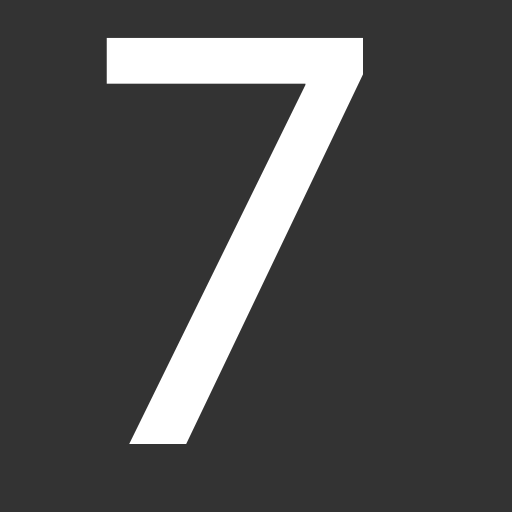
<style>
.page{position:relative;width:512px;height:512px;background:#333333}
.page>*{position:absolute;margin:0}
.t1{font:625px "MyriadPro-Regular";color:#ffffff}
</style>
<div class="page">
<p class="t1" style="left:106px;top:37px;width:257px;height:407px">7</p>
</div>
